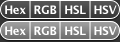
<style>
.page{position:relative;width:120px;height:42px}
.page>*{position:absolute;margin:0}
.t1{font:11.5px "LucidaGrande-Bold";letter-spacing:-0.025em;color:#ffffff}
</style>
<div class="page">
<p class="t1" style="left:5px;top:5px;width:21px;height:9px">Hex</p>
<p class="t1" style="left:34px;top:5px;width:23px;height:9px">RGB</p>
<p class="t1" style="left:65px;top:5px;width:21px;height:9px">HSL</p>
<p class="t1" style="left:94px;top:5px;width:23px;height:9px">HSV</p>
<p class="t1" style="left:5px;top:26px;width:21px;height:9px">Hex</p>
<p class="t1" style="left:34px;top:26px;width:23px;height:9px">RGB</p>
<p class="t1" style="left:65px;top:26px;width:21px;height:9px">HSL</p>
<p class="t1" style="left:94px;top:26px;width:23px;height:9px">HSV</p>
</div>
